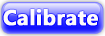
<style>
.page{position:relative;width:105px;height:36px}
.page>*{position:absolute;margin:0}
.t1{font:21.4px "SegoeUI-Bold";color:#fdfafa;font-weight:bold}
</style>
<div class="page">
<p class="t1" style="left:3px;top:9px;width:95px;height:17px">Calibrate</p>
</div>
